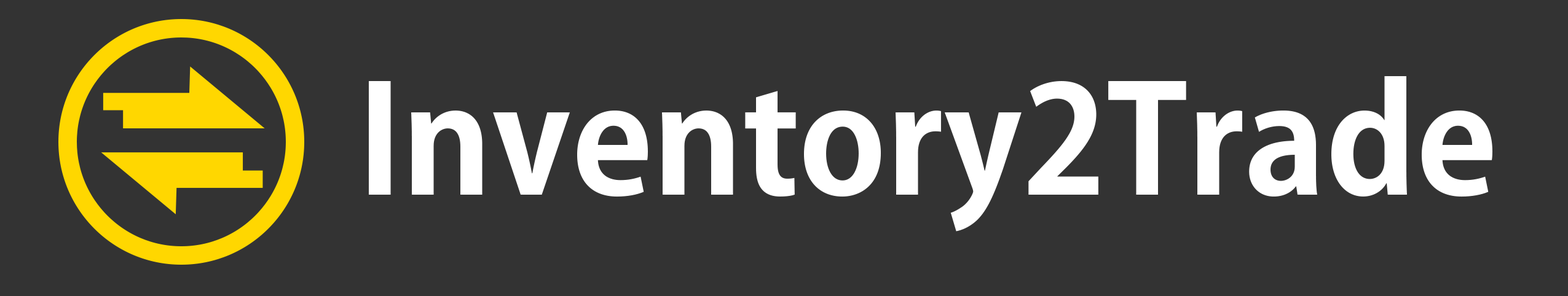
<style>
.page{position:relative;width:1568px;height:296px;background:#333333}
.page>*{position:absolute;margin:0}
.t1{font:147.5px "AdobeGothicStd-Bold";color:#ffffff}
</style>
<div class="page">
<p class="t1" style="left:369px;top:76px;width:1123px;height:156px">Inventory2Trade</p>
</div>
